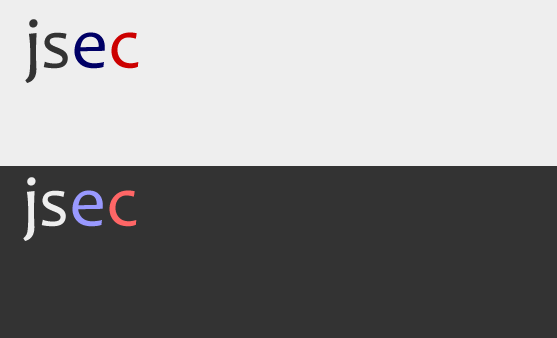
<style>
.page{position:relative;width:557px;height:338px;background:#333333}
.page>*{position:absolute;margin:0}
.t1{font:72px "Candara";color:#333333}
.t2{font:72px "Candara";color:#000066}
.t3{font:72px "Candara";color:#cc0000}
.t4{font:72px "Candara";color:#eeeeee}
.t5{font:72px "Candara";color:#9999ff}
.t6{font:72px "Candara";color:#ff6666}
</style>
<div class="page">
<p class="t1" style="left:25px;top:19px;width:114px;height:64px">js<span class="t2">e</span><span class="t3">c</span></p>
<p class="t4" style="left:23px;top:177px;width:114px;height:64px">js<span class="t5">e</span><span class="t6">c</span></p>
</div>
